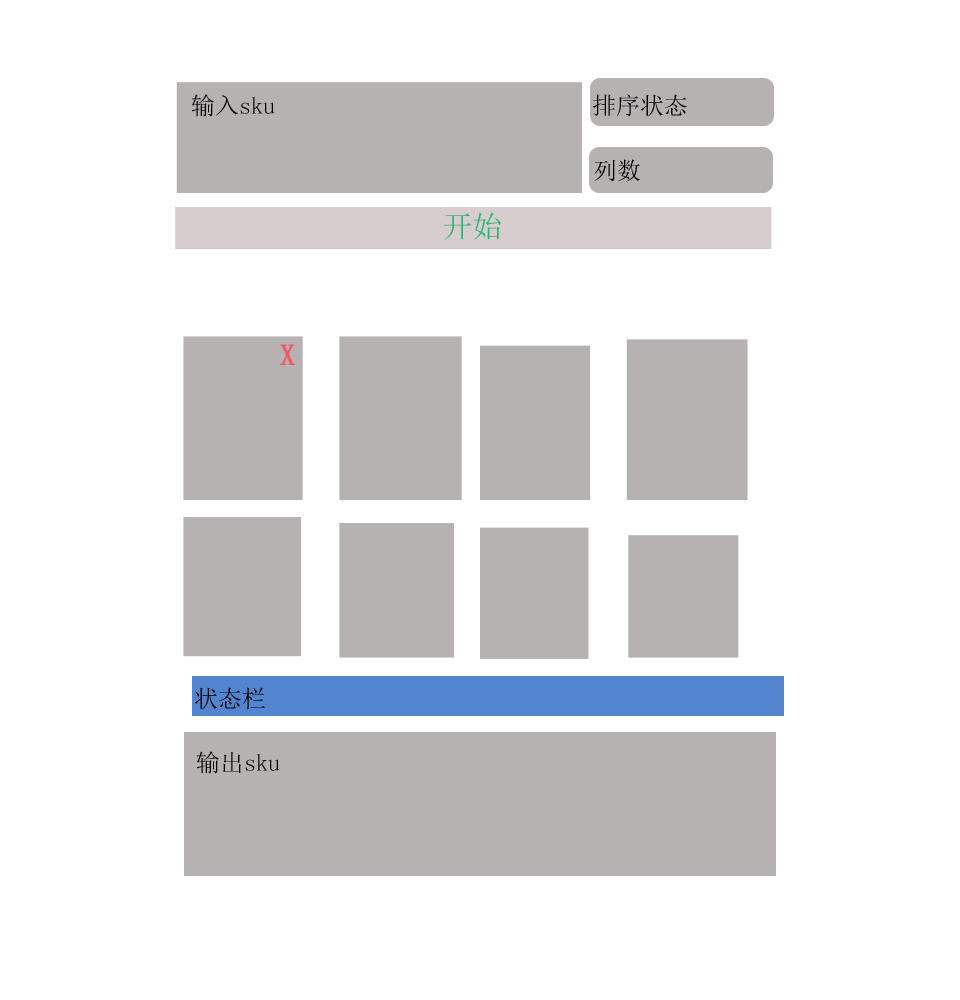
<style>
.page{position:relative;width:960px;height:1000px;background:#ffffff}
.page>*{position:absolute;margin:0}
.t1{font:24px "SimSun";color:#000000}
.t2{font:30px "SimSun";color:#2db577}
.t3{font:30px "SimSun";color:#f25669;font-weight:bold}
</style>
<div class="page">
<p class="t1" style="left:191px;top:94px;width:84px;height:23px">输入sku</p>
<p class="t1" style="left:593px;top:94px;width:94px;height:23px">排序状态</p>
<p class="t1" style="left:594px;top:159px;width:46px;height:23px">列数</p>
<p class="t2" style="left:444px;top:212px;width:57px;height:28px">开始</p>
<p class="t3" style="left:280px;top:344px;width:15px;height:21px">X</p>
<p class="t1" style="left:195px;top:687px;width:70px;height:23px">状态栏</p>
<p class="t1" style="left:196px;top:751px;width:84px;height:23px">输出sku</p>
</div>
